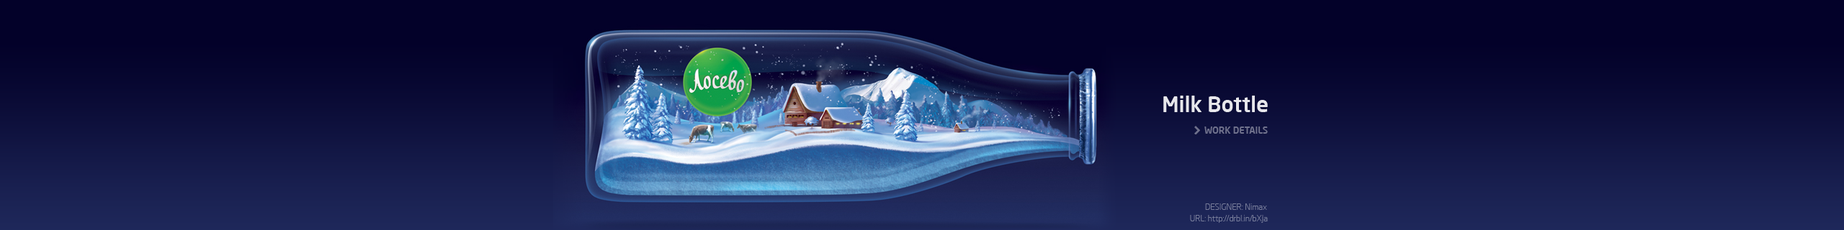
<style>
.page{position:relative;width:1844px;height:230px}
.page>*{position:absolute;margin:0}
.t1{font:21.6px "NeoSansPro-Medium";letter-spacing:-0.005em;color:#ffffff}
.t2{font:9.4px "NeoSansPro-Medium";letter-spacing:-0.005em;color:#6f718b}
.t3{font:8.6px "NeoSansPro-Light";letter-spacing:-0.005em;color:#767c99}
.t4{font:8.6px "NeoSansPro-Light";letter-spacing:-0.005em;color:#777d9a}
</style>
<div class="page">
<p class="t1" style="left:1163px;top:96px;width:105px;height:16px;opacity:0.9">Milk Bottle</p>
<p class="t2" style="left:1204px;top:127px;width:64px;height:7px">WORK DETAILS</p>
<p class="t3" style="left:1205px;top:204px;width:62px;height:6px">DESIGNER: Nimax</p>
<p class="t4" style="left:1190px;top:215px;width:78px;height:8px">URL: http://drbl.in/bXja</p>
</div>
